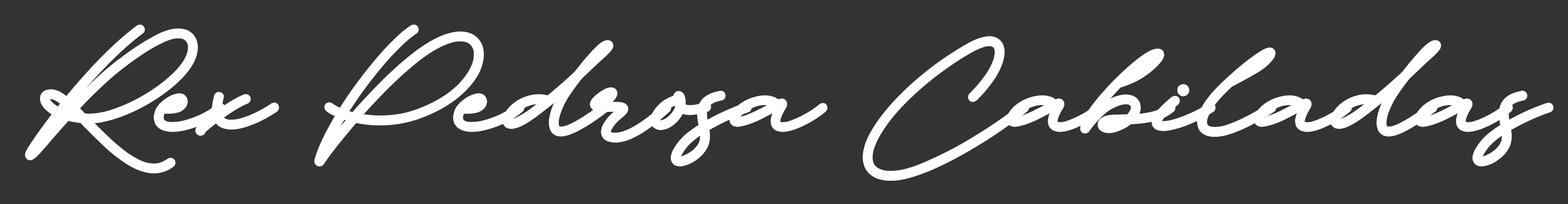
<style>
.page{position:relative;width:1568px;height:204px;background:#333333}
.page>*{position:absolute;margin:0}
.t1{font:150.9px "BulgaryRose";letter-spacing:-0.025em;color:#ffffff}
</style>
<div class="page">
<p class="t1" style="left:28px;top:28px;width:1523px;height:149px">Rex Pedrosa Cabiladas</p>
</div>
